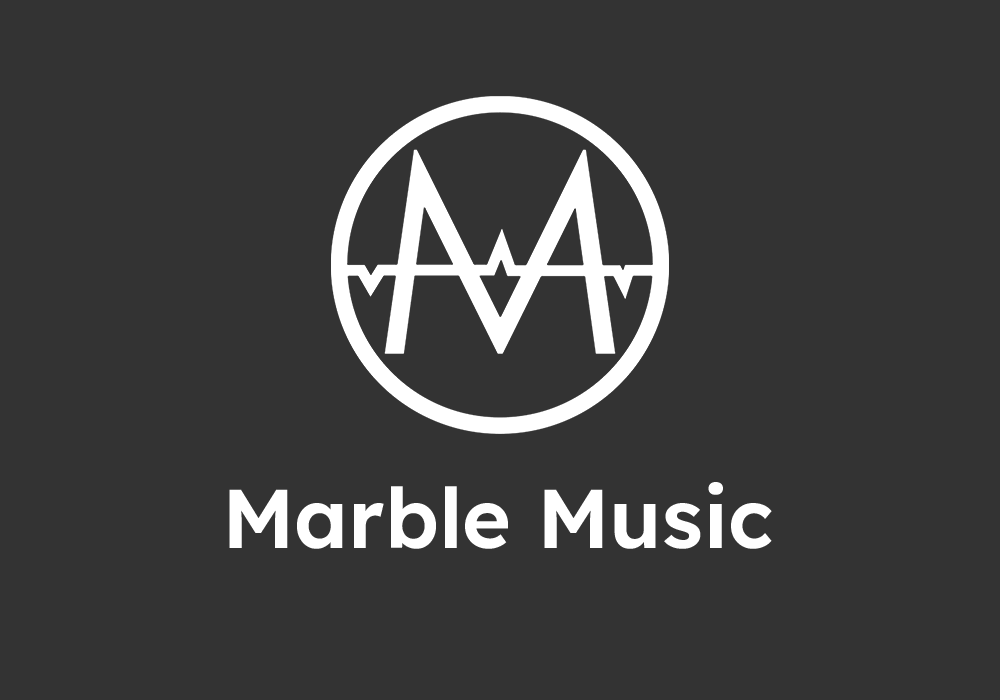
<style>
.page{position:relative;width:1000px;height:700px;background:#333333}
.page>*{position:absolute;margin:0}
.t1{font:83.3px "Lexend-SemiBold";color:#ffffff}
</style>
<div class="page">
<p class="t1" style="left:229px;top:482px;width:543px;height:67px">Marble Music</p>
</div>
